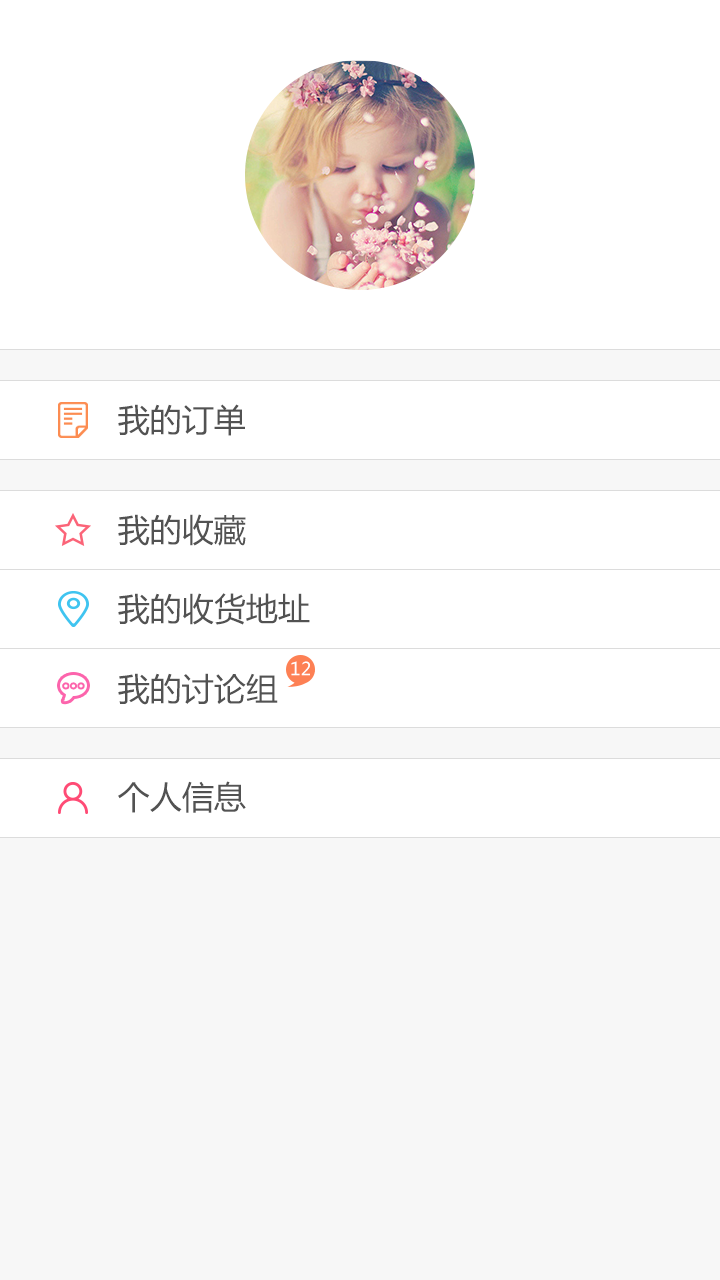
<style>
.page{position:relative;width:720px;height:1280px;background:#ffffff}
.page>*{position:absolute;margin:0}
.t1{font:32px "MicrosoftYaHei";color:#525252}
.t2{font:18px "MicrosoftYaHei";color:#ffffff}
</style>
<div class="page">
<p class="t1" style="left:118px;top:404px;width:127px;height:32px">我的订单</p>
<p class="t1" style="left:118px;top:514px;width:128px;height:32px">我的收藏</p>
<p class="t1" style="left:118px;top:593px;width:192px;height:32px">我的收货地址</p>
<p class="t2" style="left:291px;top:661px;width:19px;height:15px">12</p>
<p class="t1" style="left:118px;top:673px;width:160px;height:32px">我的讨论组</p>
<p class="t1" style="left:118px;top:781px;width:128px;height:32px">个人信息</p>
</div>
